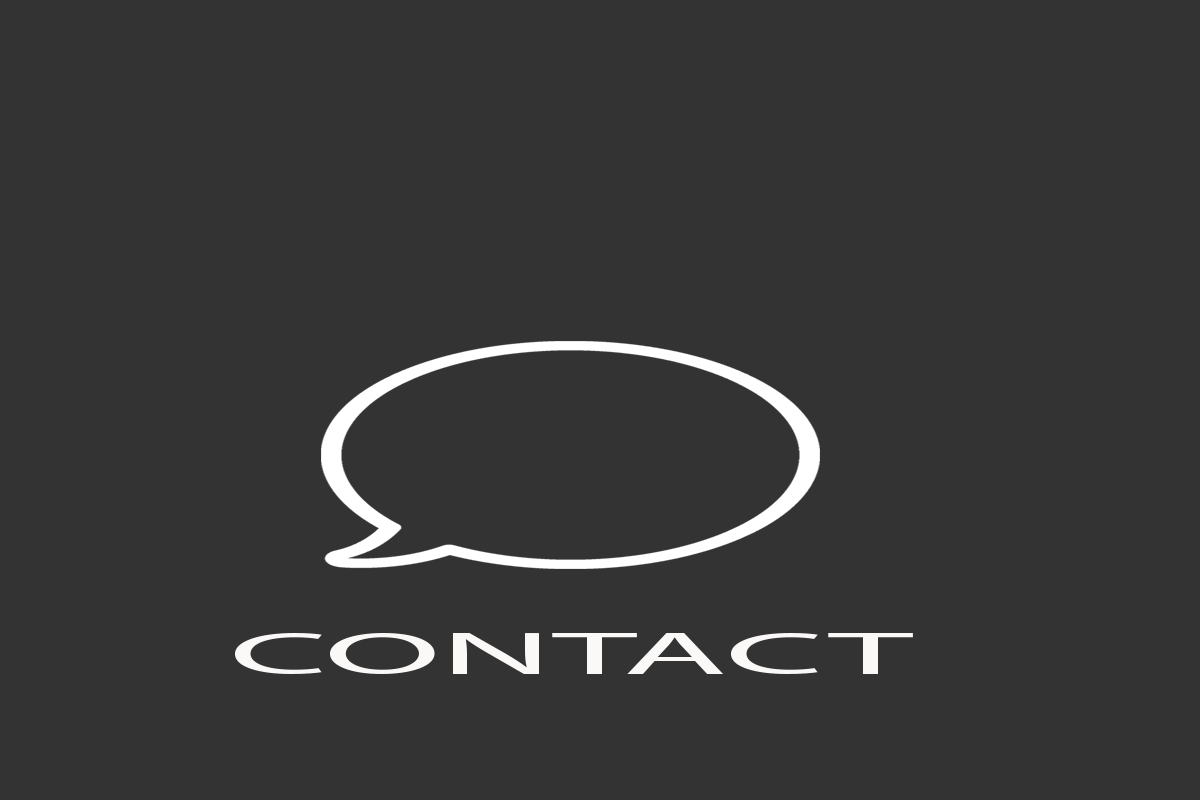
<style>
.page{position:relative;width:1200px;height:800px;background:#333333}
.page>*{position:absolute;margin:0}
.t1{font:59.4px "MyriadHebrew-Regular";color:#fbf8f8;scale:2.85 1}
</style>
<div class="page">
<p class="t1" style="left:235px;top:633px;width:678px;height:41px">CONTACT</p>
</div>
